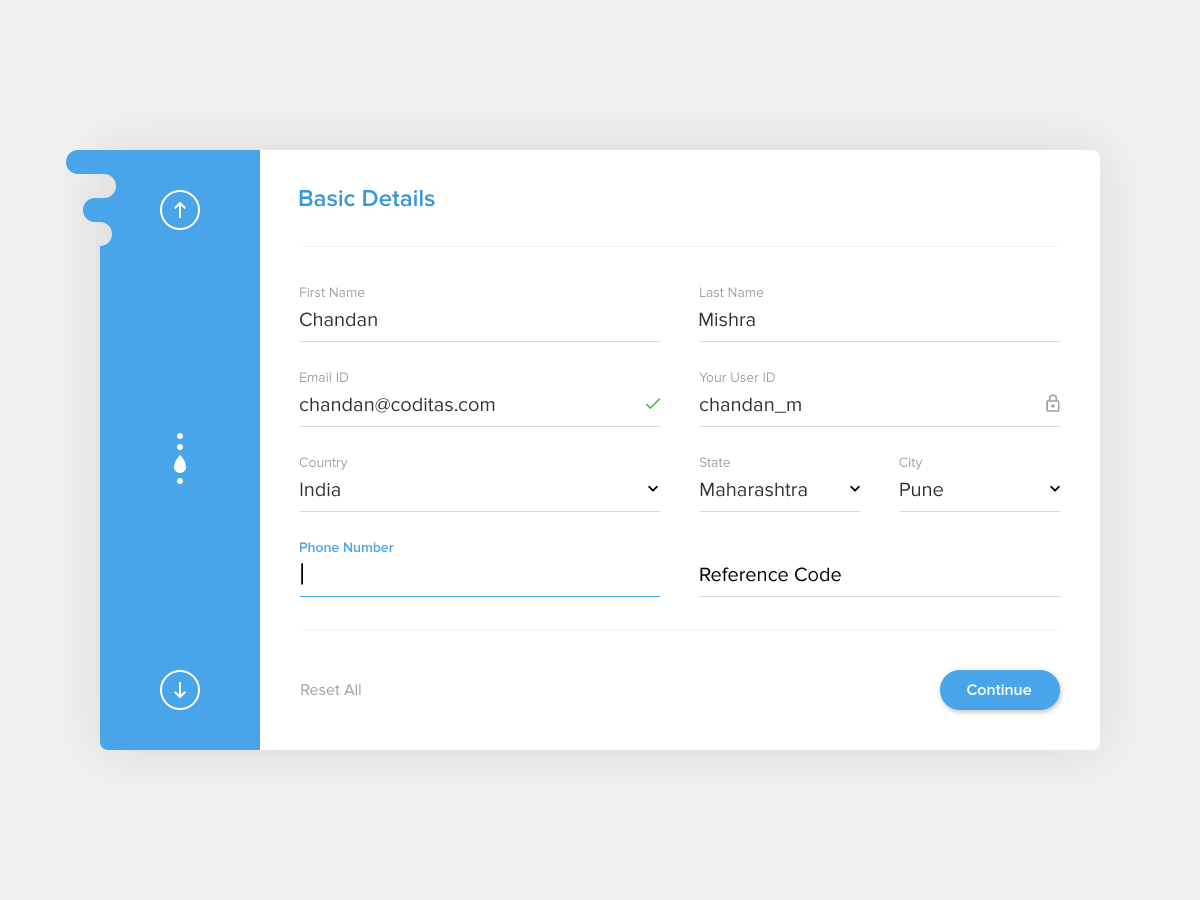
<style>
.page{position:relative;width:1200px;height:900px;background:#ffffff}
.page>*{position:absolute;margin:0}
.t1{font:24px "ProximaNova-Semibold";color:#3897d9}
.t2{font:14px "ProximaNova-Regular";color:#9e9e9e}
.t3{font:20px "ProximaNova-Regular";color:#333333}
.t4{font:14px "ProximaNova-Semibold";color:#48a5ea}
.t5{font:30px "ProximaNova-Regular";color:#000000}
.t6{font:20px "ProximaNova-Regular";color:#000000}
.t7{font:16px "ProximaNova-Regular";color:#a0a0a0}
.t8{font:16px "ProximaNova-Semibold";color:#ffffff}
</style>
<div class="page">
<p class="t1" style="left:299px;top:190px;width:136px;height:17px">Basic Details</p>
<p class="t2" style="left:300px;top:287px;width:65px;height:10px">First Name</p>
<p class="t2" style="left:700px;top:287px;width:64px;height:10px">Last Name</p>
<p class="t3" style="left:300px;top:312px;width:77px;height:15px">Chandan</p>
<p class="t3" style="left:699px;top:312px;width:56px;height:15px">Mishra</p>
<p class="t2" style="left:300px;top:372px;width:48px;height:10px">Email ID</p>
<p class="t2" style="left:699px;top:372px;width:76px;height:10px">Your User ID</p>
<p class="t3" style="left:300px;top:397px;width:195px;height:16px">chandan@coditas.com</p>
<p class="t3" style="left:700px;top:397px;width:101px;height:16px">chandan_m</p>
<p class="t2" style="left:299px;top:457px;width:49px;height:13px">Country</p>
<p class="t2" style="left:699px;top:457px;width:31px;height:10px">State</p>
<p class="t2" style="left:899px;top:457px;width:24px;height:13px">City</p>
<p class="t3" style="left:300px;top:482px;width:40px;height:15px">India</p>
<p class="t3" style="left:700px;top:482px;width:107px;height:15px">Maharashtra</p>
<p class="t3" style="left:900px;top:482px;width:43px;height:15px">Pune</p>
<p class="t4" style="left:300px;top:542px;width:94px;height:10px">Phone Number</p>
<p class="t5" style="left:301px;top:563px;width:2px;height:22px">|</p>
<p class="t6" style="left:700px;top:567px;width:141px;height:15px">Reference Code</p>
<p class="t7" style="left:301px;top:684px;width:60px;height:11px">Reset All</p>
<p class="t8" style="left:967px;top:684px;width:65px;height:11px">Continue</p>
</div>
